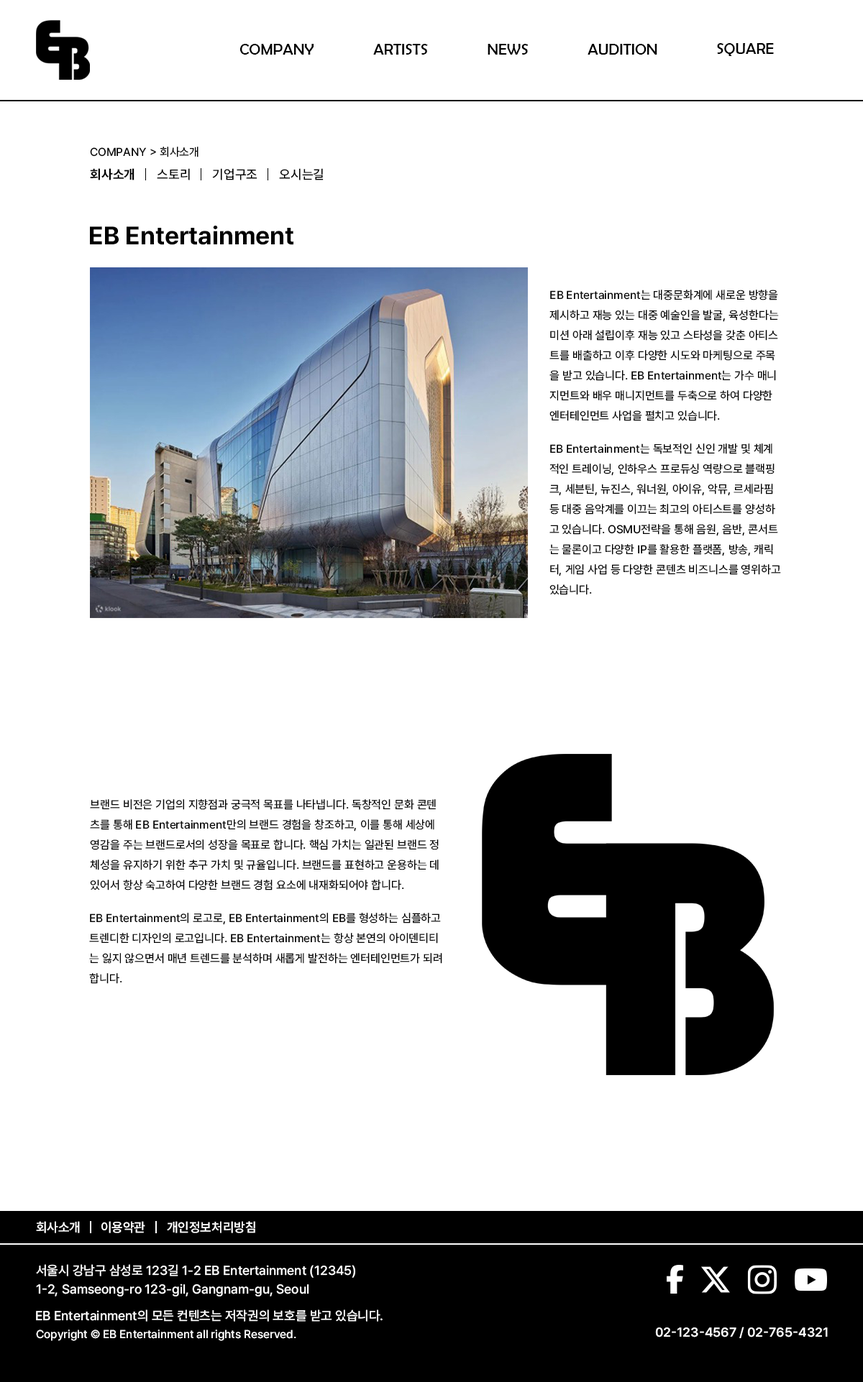
<style>
.page{position:relative;width:863px;height:1382px;background:#ffffff}
.page>*{position:absolute;margin:0}
.t1{font:15.8px "BerlinSansFB-Reg";color:#000000}
.t2{font:11.5px "Pretendard-Medium";color:#000000}
.t3{font:12.9px "Pretendard-Bold";color:#000000}
.t4{font:12.9px "Pretendard-Medium";color:#000000}
.t5{font:25.2px "Pretendard-Bold";color:#000000}
.t6{font:12.9px "Pretendard-SemiBold";color:#ffffff}
.t7{font:12.9px/18.7px "Pretendard-Medium";color:#ffffff}
.t8{font:12.9px "Pretendard-Medium";color:#ffffff}
.t9{font:11.5px "Pretendard-Medium";color:#ffffff}
</style>
<div class="page">
<p class="t1" style="left:239px;top:44px;width:74px;height:11px">COMPANY</p>
<p class="t1" style="left:373px;top:44px;width:55px;height:11px">ARTISTS</p>
<p class="t1" style="left:487px;top:44px;width:41px;height:11px">NEWS</p>
<p class="t1" style="left:587px;top:44px;width:70px;height:11px">AUDITION</p>
<p class="t1" style="left:717px;top:43px;width:56px;height:13px">SQUARE</p>
<p class="t2" style="left:90px;top:147px;width:108px;height:10px">COMPANY &gt; 회사소개</p>
<p class="t3" style="left:90px;top:168px;width:44px;height:12px">회사소개</p>
<p class="t4" style="left:157px;top:168px;width:33px;height:12px">스토리</p>
<p class="t4" style="left:212px;top:168px;width:45px;height:12px">기업구조</p>
<p class="t4" style="left:279px;top:168px;width:44px;height:12px">오시는길</p>
<p class="t5" style="left:90px;top:225px;width:203px;height:20px">EB Entertainment</p>
<p class="t2" style="left:549px;top:290px;width:230px;height:131px">EB Entertainment는 대중문화계에 새로운 방향을<br>제시하고 재능 있는 대중 예술인을 발굴, 육성한다는<br>미션 아래 설립이후 재능 있고 스타성을 갖춘 아티스<br>트를 배출하고 이후 다양한 시도와 마케팅으로 주목<br>을 받고 있습니다. EB Entertainment는 가수 매니<br>지먼트와 배우 매니지먼트를 두축으로 하여 다양한 <br>엔터테인먼트 사업을 펼치고 있습니다.</p>
<p class="t2" style="left:549px;top:444px;width:232px;height:151px">EB Entertainment는 독보적인 신인 개발 및 체계<br>적인 트레이닝, 인하우스 프로듀싱 역량으로 블랙핑<br>크, 세븐틴, 뉴진스, 워너원, 아이유, 악뮤, 르세라핌<br>등 대중 음악계를 이끄는 최고의 아티스트를 양성하<br>고 있습니다. OSMU전략을 통해 음원, 음반, 콘서트<br>는 물론이고 다양한 IP를 활용한 플랫폼, 방송, 캐릭<br>터, 게임 사업 등 다양한 콘텐츠 비즈니스를 영위하고<br>있습니다.</p>
<p class="t2" style="left:90px;top:799px;width:348px;height:92px">브랜드 비전은 기업의 지향점과 궁극적 목표를 나타냅니다. 독창적인 문화 콘텐<br>츠를 통해 EB Entertainment만의 브랜드 경험을 창조하고, 이를 통해 세상에<br>영감을 주는 브랜드로서의 성장을 목표로 합니다. 핵심 가치는 일관된 브랜드 정<br>체성을 유지하기 위한 추구 가치 및 규율입니다. 브랜드를 표현하고 운용하는 데<br>있어서 항상 숙고하여 다양한 브랜드 경험 요소에 내재화되어야 합니다.</p>
<p class="t2" style="left:89px;top:913px;width:353px;height:71px">EB Entertainment의 로고로, EB Entertainment의 EB를 형성하는 심플하고<br>트렌디한 디자인의 로고입니다. EB Entertainment는 항상 본연의 아이덴티티<br>는 잃지 않으면서 매년 트렌드를 분석하며 새롭게 발전하는 엔터테인먼트가 되려<br>합니다.</p>
<p class="t6" style="left:36px;top:1221px;width:44px;height:13px">회사소개</p>
<p class="t6" style="left:101px;top:1221px;width:44px;height:13px">이용약관</p>
<p class="t6" style="left:167px;top:1221px;width:88px;height:13px">개인정보처리방침</p>
<p class="t7" style="left:36px;top:1264px;width:319px;height:33px">서울시 강남구 삼성로 123길 1-2 EB Entertainment (12345)<br>1-2, Samseong-ro 123-gil, Gangnam-gu, Seoul</p>
<p class="t8" style="left:36px;top:1310px;width:346px;height:12px">EB Entertainment의 모든 컨텐츠는 저작권의 보호를 받고 있습니다.</p>
<p class="t9" style="left:36px;top:1330px;width:260px;height:11px">Copyright © EB Entertainment all rights Reserved.</p>
<p class="t6" style="left:655px;top:1327px;width:172px;height:11px">02-123-4567 / 02-765-4321</p>
</div>
